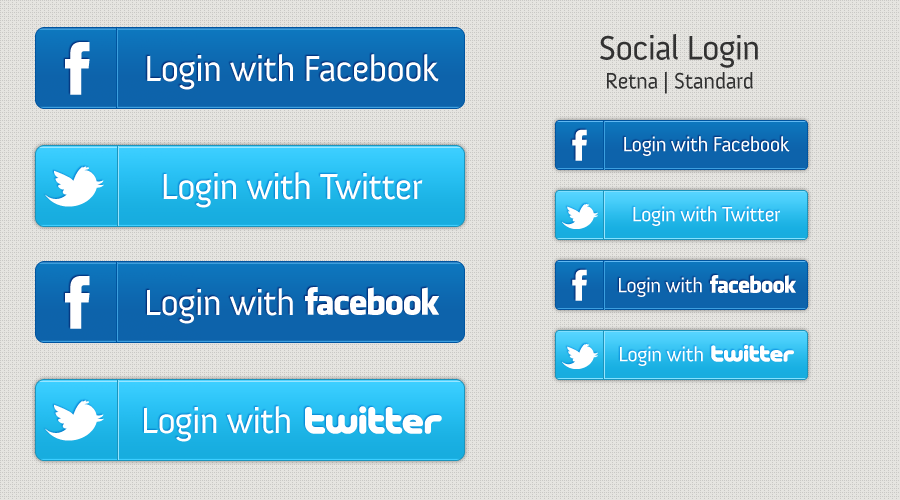
<style>
.page{position:relative;width:900px;height:500px;background:#e5e4e0}
.page>*{position:absolute;margin:0}
.t1{font:23px/29px "Anivers-Regular";letter-spacing:-0.025em;color:#323232}
.t2{font:35px/29px "Anivers-Regular";letter-spacing:-0.025em;color:#323232}
.t3{font:37px "Anivers-Regular";letter-spacing:-0.025em;color:#ffffff}
.t4{font:21px "Anivers-Regular";letter-spacing:-0.025em;color:#ffffff}
</style>
<div class="page">
<p class="t1" style="left:600px;top:34px;width:158px;height:60px;text-align:center"><span class="t2">Social Login<br></span>Retna | Standard</p>
<p class="t3" style="left:147px;top:54px;width:292px;height:36px">Login with Facebook</p>
<p class="t4" style="left:624px;top:136px;width:166px;height:20px">Login with Facebook</p>
<p class="t3" style="left:163px;top:172px;width:260px;height:36px">Login with Twitter</p>
<p class="t4" style="left:633px;top:206px;width:147px;height:20px">Login with Twitter</p>
<p class="t4" style="left:619px;top:277px;width:83px;height:20px">Login with</p>
<p class="t3" style="left:147px;top:288px;width:146px;height:36px">Login with</p>
<p class="t4" style="left:620px;top:346px;width:83px;height:20px">Login with</p>
<p class="t3" style="left:144px;top:406px;width:146px;height:36px">Login with</p>
</div>
